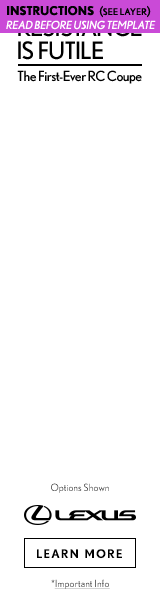
<style>
.page{position:relative;width:160px;height:600px;background:#ffffff}
.page>*{position:absolute;margin:0}
.t1{font:24px/23px "Nobel-Regular";letter-spacing:-0.035em;text-transform:uppercase}
.t2{font:14px "Nobel-Regular";letter-spacing:-0.038em;color:#000000}
.t3{font:10px "Nobel-Book";letter-spacing:0.01em}
.t4{font:12px "Nobel-Bold";letter-spacing:0.085em;color:#000000;text-transform:uppercase}
.t5{font:10px "Nobel-Book";letter-spacing:0.01em;text-decoration:underline}
</style>
<div class="page">
<p class="t1" style="left:18px;top:18px;width:124px;height:42px">resistance<br>is futile</p>
<p class="t2" style="left:17px;top:70px;width:125px;height:14px">The First-Ever RC Coupe</p>
<p class="t3" style="left:51px;top:483px;width:58px;height:10px">Options Shown</p>
<p class="t4" style="left:37px;top:549px;width:85px;height:10px">learn more</p>
<p class="t5" style="left:51px;top:579px;width:59px;height:10px"><span class="t3">*</span>Important Info</p>
</div>
